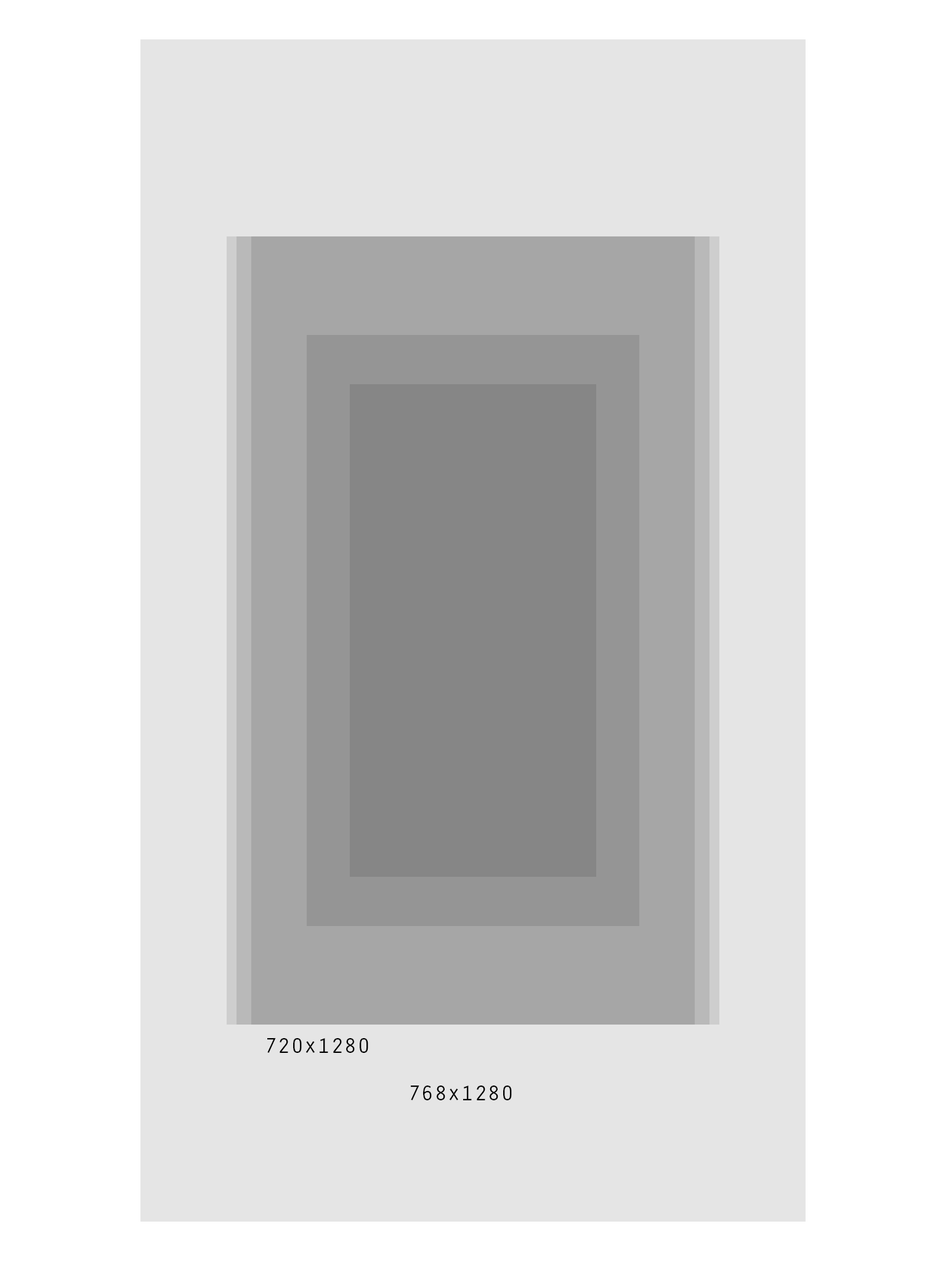
<style>
.page{position:relative;width:946px;height:1261px;background:#ffffff}
.page>*{position:absolute;margin:0}
.t1{font:22.2px "OratorStd";color:#000000}
</style>
<div class="page">
<p class="t1" style="left:267px;top:1038px;width:101px;height:15px">720x1280</p>
<p class="t1" style="left:411px;top:1085px;width:101px;height:15px">768x1280</p>
</div>
